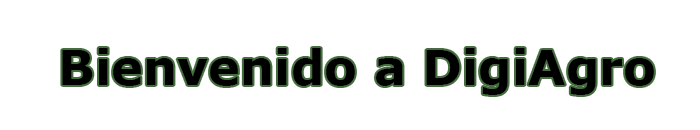
<style>
.page{position:relative;width:700px;height:130px;background:#ffffff}
.page>*{position:absolute;margin:0}
.t1{font:48px "Verdana-Bold";color:#000000}
</style>
<div class="page">
<p class="t1" style="left:62px;top:48px;width:592px;height:47px">Bienvenido a DigiAgro</p>
</div>
